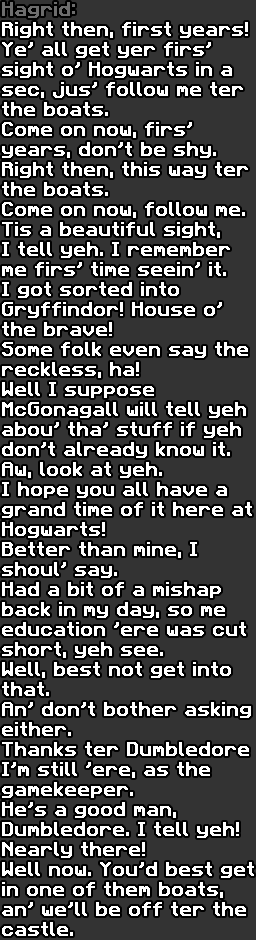
<style>
.page{position:relative;width:256px;height:940px;background:#333333}
.page>*{position:absolute;margin:0}
.t1{font:16px/20px "Mineglyph-Faithful";color:#ffffff;font-weight:bold;scale:1.03 1}
.t2{font:16px/20px "Mineglyph-Faithful";color:#6d6d6d;font-weight:bold;scale:1.03 1}
</style>
<div class="page">
<p class="t1" style="left:2px;top:2px;width:252px;height:934px"><span class="t2">Hagrid:<br></span>Right then, first years!<br>Ye' all get yer firs'<br>sight o' Hogwarts in a<br>sec, jus' follow me ter<br>the boats.<br>Come on now, firs'<br>years, don’t be shy. <br>Right then, this way ter<br>the boats.<br>Come on now, follow me.<br>Tis a beautiful sight,<br>I tell yeh. I remember<br>me firs' time seein' it.<br>I got sorted into<br>Gryffindor! House o'<br>the brave!<br>Some folk even say the<br>reckless, ha!<br>Well I suppose <br>McGonagall will tell yeh<br>abou' tha’ stuff if yeh<br>don't already know it.<br>Aw, look at yeh.<br>I hope you all have a<br>grand time of it here at<br>Hogwarts!<br>Better than mine, I <br>shoul' say. <br>Had a bit of a mishap<br>back in my day, so me<br>education 'ere was cut <br>short, yeh see. <br>Well, best not get into<br>that.<br>An' don't bother asking<br>either.<br>Thanks ter Dumbledore<br>I'm still 'ere, as the<br>gamekeeper.<br>He's a good man,<br>Dumbledore. I tell yeh!<br>Nearly there!<br>Well now. You'd best get<br>in one of them boats,<br>an' we'll be off ter the<br>castle.</p>
</div>
